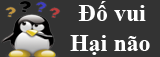
<style>
.page{position:relative;width:160px;height:57px;background:#333333}
.page>*{position:absolute;margin:0}
.t1{font:24px "TimesNewRomanPS-BoldMT";color:#ffffff}
</style>
<div class="page">
<p class="t1" style="left:78px;top:1px;width:68px;height:20px">Đố vui</p>
<p class="t1" style="left:70px;top:35px;width:80px;height:20px">Hại não</p>
</div>
